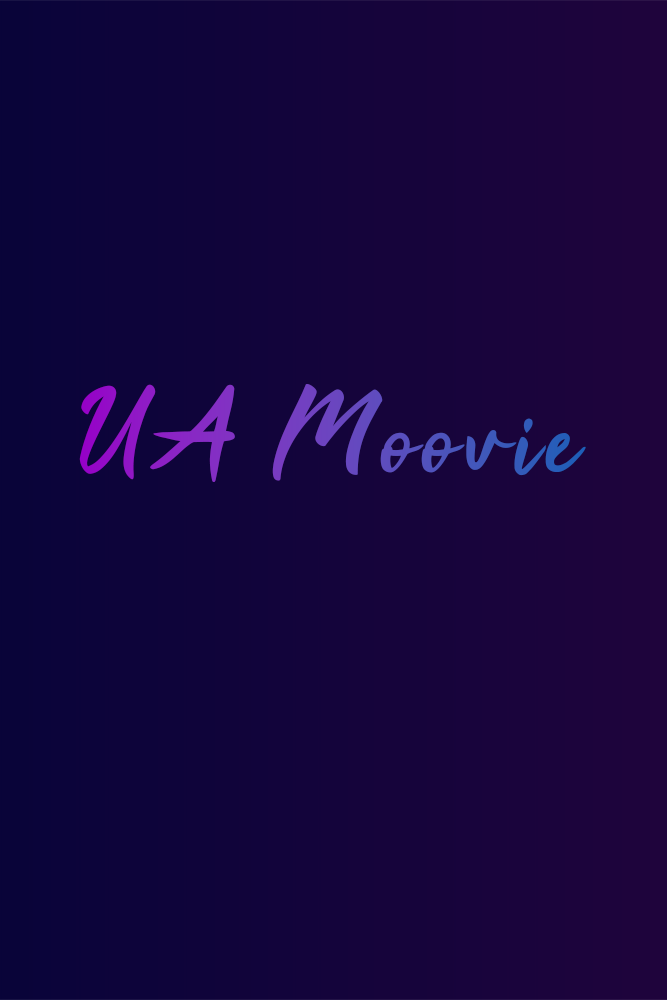
<style>
.page{position:relative;width:667px;height:1000px}
.page>*{position:absolute;margin:0}
.t1{font:120px "Tahu!";letter-spacing:0.05em}
</style>
<div class="page">
<p class="t1" style="left:79px;top:384px;width:507px;height:98px">UA Moovie</p>
</div>
